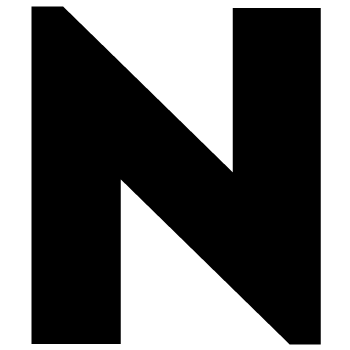
<style>
.page{position:relative;width:350px;height:350px;background:#000000}
.page>*{position:absolute;margin:0}
.t1{font:480px "Intro";color:#000000}
</style>
<div class="page">
<p class="t1" style="left:31px;top:6px;width:290px;height:339px">n</p>
</div>
